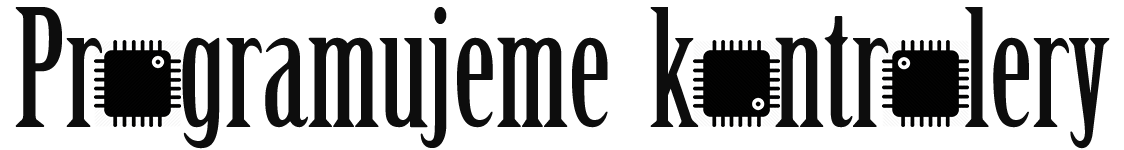
<style>
.page{position:relative;width:1124px;height:150px;background:#ffffff}
.page>*{position:absolute;margin:0}
.t1{font:160px "BirchStd";color:#0d0d0d}
</style>
<div class="page">
<p class="t1" style="left:15px;top:7px;width:1095px;height:142px">Pr    gramujeme  k    ntr    lery</p>
</div>
